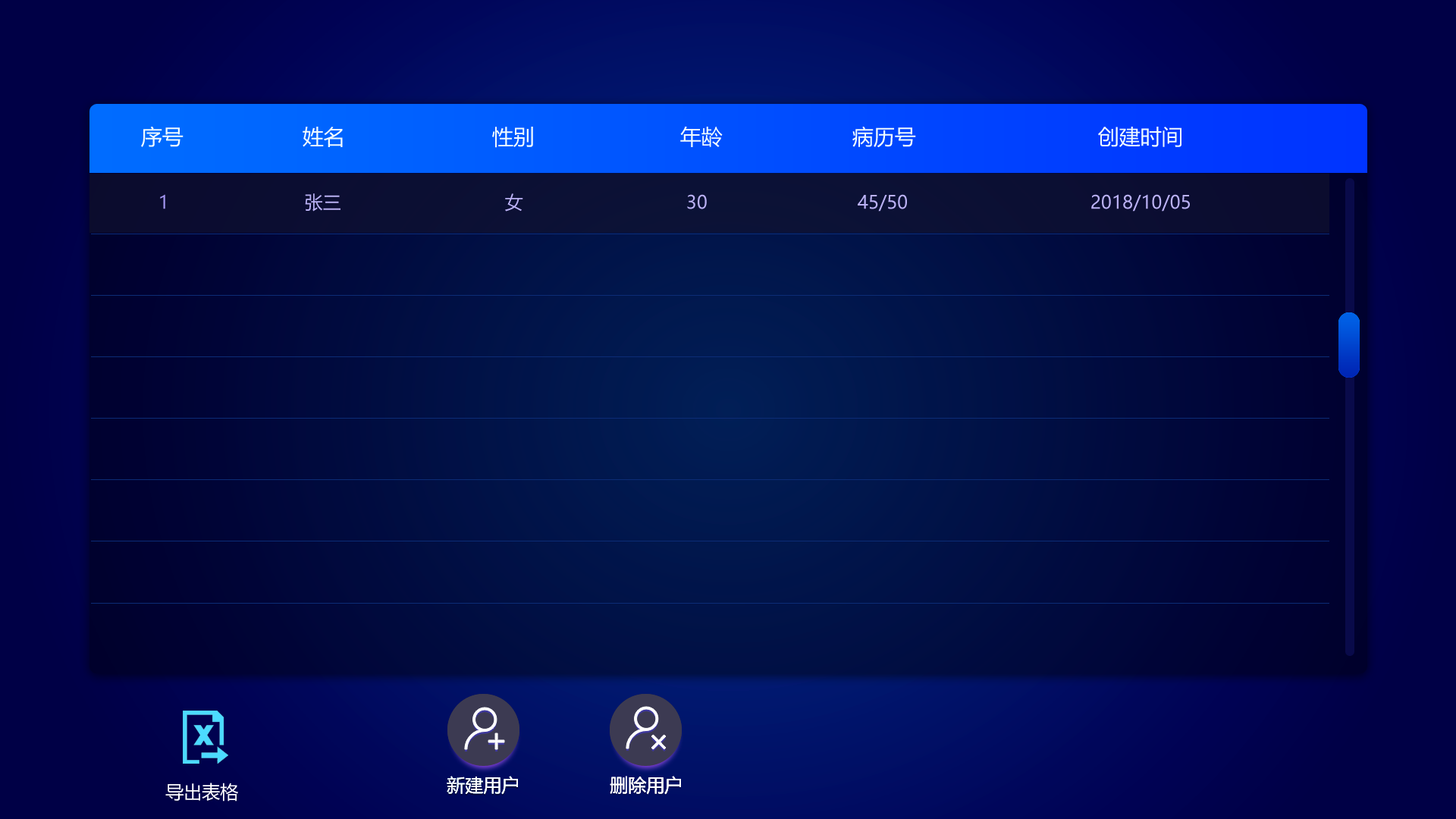
<style>
.page{position:relative;width:1456px;height:819px}
.page>*{position:absolute;margin:0}
.t1{font:21.2px "MicrosoftYaHei";color:#f2fbff}
.t2{font:18.2px "MicrosoftYaHei";color:#a194ef}
.t3{font:18.2px "MicrosoftYaHei";color:#bab1f4}
.t4{font:18.2px "MicrosoftYaHei";color:#ffffff}
</style>
<div class="page">
<p class="t1" style="left:141px;top:126px;width:43px;height:21px">序号</p>
<p class="t1" style="left:680px;top:126px;width:43px;height:21px">年龄</p>
<p class="t1" style="left:852px;top:126px;width:64px;height:22px">病历号</p>
<p class="t1" style="left:303px;top:127px;width:40px;height:20px">姓名</p>
<p class="t1" style="left:492px;top:127px;width:41px;height:21px">性别</p>
<p class="t1" style="left:1098px;top:127px;width:83px;height:20px">创建时间</p>
<p class="t2" style="left:160px;top:194px;width:5px;height:15px">1</p>
<p class="t3" style="left:305px;top:193px;width:35px;height:19px">张三</p>
<p class="t3" style="left:505px;top:193px;width:18px;height:19px">女</p>
<p class="t3" style="left:687px;top:194px;width:20px;height:15px">30</p>
<p class="t3" style="left:858px;top:194px;width:49px;height:18px">45/50</p>
<p class="t3" style="left:1091px;top:194px;width:99px;height:18px">2018/10/05</p>
<p class="t4" style="left:165px;top:783px;width:73px;height:19px">导出表格</p>
<p class="t4" style="left:447px;top:776px;width:71px;height:19px">新建用户</p>
<p class="t4" style="left:447px;top:776px;width:71px;height:19px">新建用户</p>
<p class="t4" style="left:447px;top:776px;width:71px;height:19px">新建用户</p>
<p class="t4" style="left:610px;top:776px;width:71px;height:19px">删除用户</p>
<p class="t4" style="left:610px;top:776px;width:71px;height:19px">删除用户</p>
<p class="t4" style="left:610px;top:776px;width:71px;height:19px">删除用户</p>
</div>
